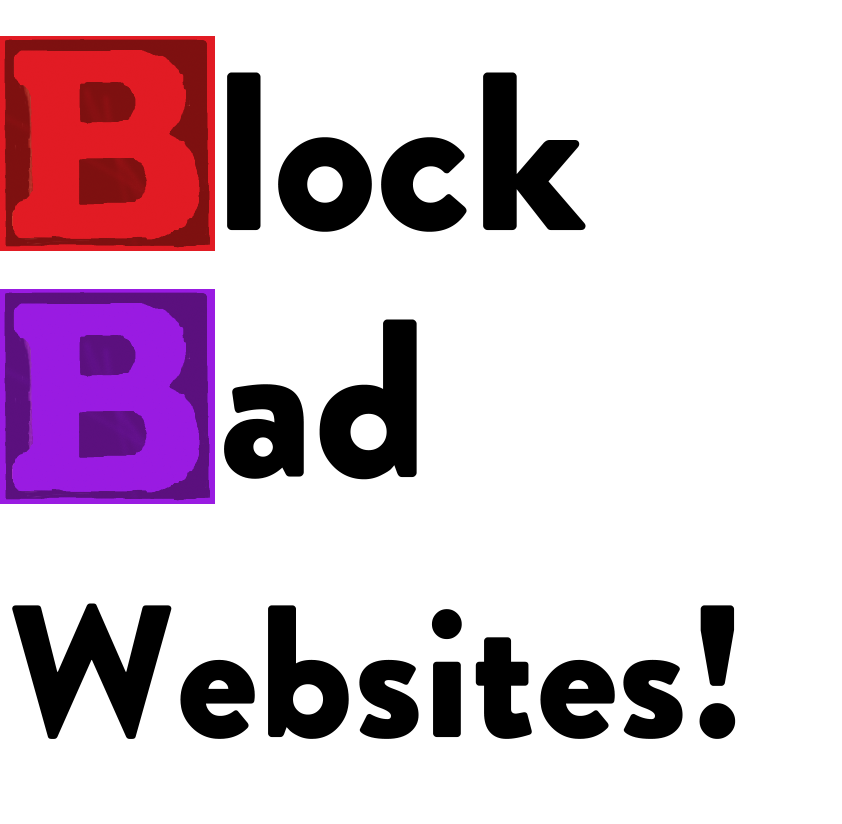
<style>
.page{position:relative;width:842px;height:824px;background:#ffffff}
.page>*{position:absolute;margin:0}
.t1{font:225.2px "JERGVZ+BrandonGrotesque-Black";color:#000000}
.t2{font:187.7px "JERGVZ+BrandonGrotesque-Black";color:#000000}
</style>
<div class="page">
<p class="t1" style="left:227px;top:72px;width:359px;height:160px">lock</p>
<p class="t1" style="left:224px;top:319px;width:193px;height:161px">ad</p>
<p class="t2" style="left:12px;top:603px;width:724px;height:136px">Websites!</p>
</div>
